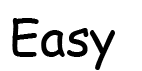
<style>
.page{position:relative;width:142px;height:71px;background:#ffffff}
.page>*{position:absolute;margin:0}
.t1{font:50px "ComicSansMS";color:#000000}
</style>
<div class="page">
<p class="t1" style="left:12px;top:18px;width:103px;height:52px">Easy</p>
</div>
